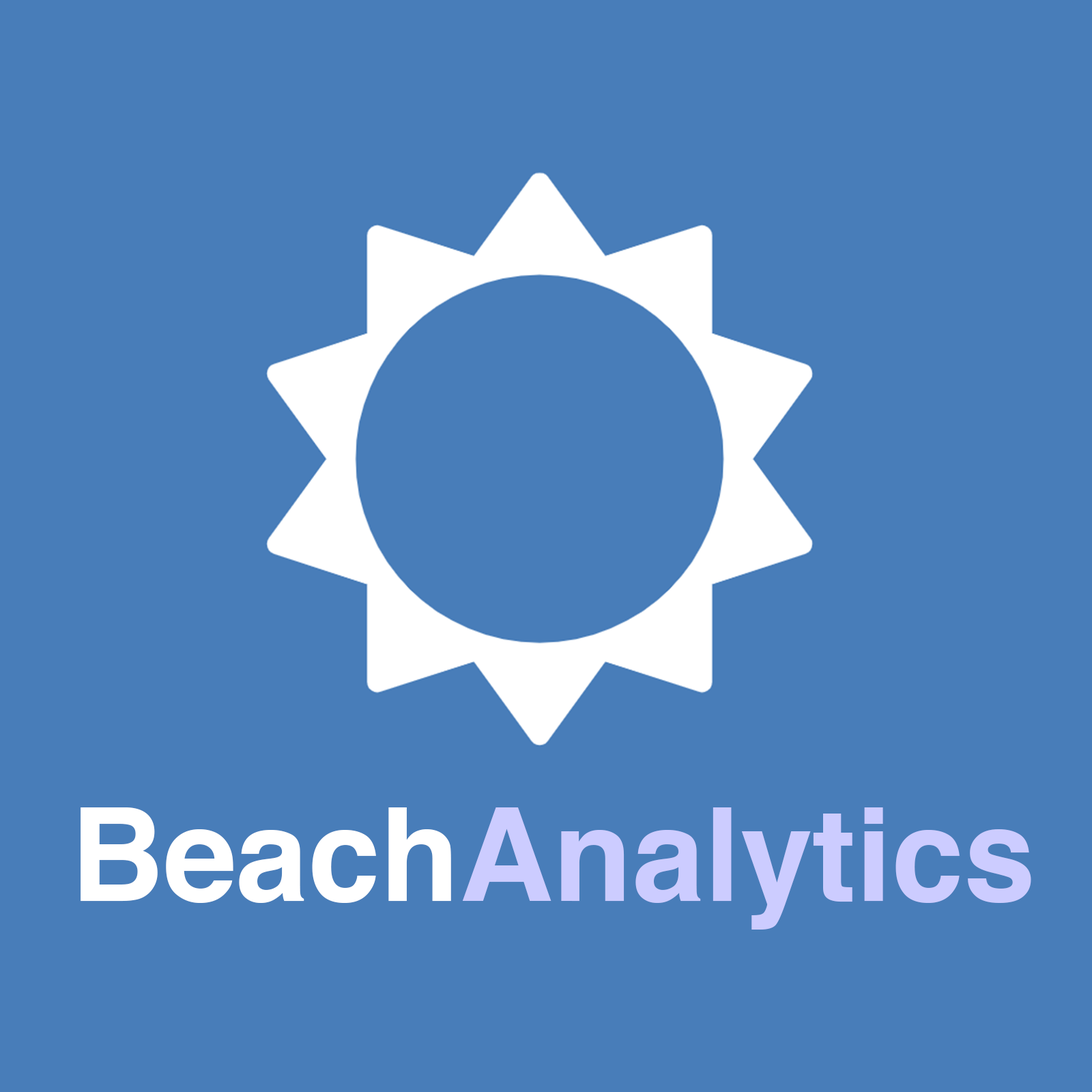
<style>
.page{position:relative;width:1092px;height:1092px;background:#487db9}
.page>*{position:absolute;margin:0}
.t1{font:129.7px "Helvetica-Bold";color:#ccccff}
.t2{font:129.7px "Helvetica-Bold";color:#ffffff}
</style>
<div class="page">
<p class="t1" style="left:81px;top:807px;width:950px;height:123px"><span class="t2">Beach</span>Analytics</p>
</div>
